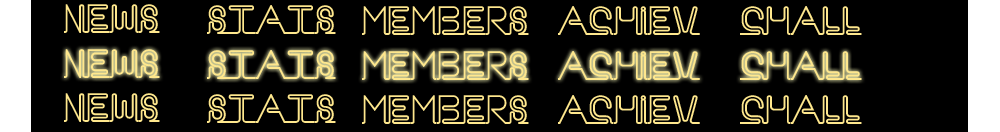
<style>
.page{position:relative;width:1000px;height:132px;background:#000000}
.page>*{position:absolute;margin:0}
.t1{font:36px "Neon";color:#fee78d}
</style>
<div class="page">
<p class="t1" style="left:64px;top:4px;width:96px;height:29px">News</p>
<p class="t1" style="left:207px;top:5px;width:129px;height:29px">Stats</p>
<p class="t1" style="left:362px;top:6px;width:167px;height:29px">Members</p>
<p class="t1" style="left:558px;top:6px;width:142px;height:29px">ACHIEV</p>
<p class="t1" style="left:740px;top:6px;width:122px;height:29px">Chall</p>
<p class="t1" style="left:64px;top:49px;width:96px;height:29px">News</p>
<p class="t1" style="left:207px;top:50px;width:129px;height:29px">Stats</p>
<p class="t1" style="left:362px;top:51px;width:167px;height:29px">Members</p>
<p class="t1" style="left:558px;top:51px;width:142px;height:29px">ACHIEV</p>
<p class="t1" style="left:740px;top:51px;width:122px;height:29px">Chall</p>
<p class="t1" style="left:64px;top:93px;width:96px;height:29px">News</p>
<p class="t1" style="left:207px;top:94px;width:129px;height:29px">Stats</p>
<p class="t1" style="left:362px;top:95px;width:167px;height:29px">Members</p>
<p class="t1" style="left:558px;top:95px;width:142px;height:29px">ACHIEV</p>
<p class="t1" style="left:740px;top:95px;width:122px;height:29px">Chall</p>
</div>
